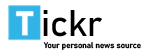
<style>
.page{position:relative;width:150px;height:54px;background:#ffffff}
.page>*{position:absolute;margin:0}
.t1{font:35.8px "Bahnschrift";color:#000000}
.t2{font:8px "Bahnschrift";color:#000000}
</style>
<div class="page">
<p class="t1" style="left:43px;top:10px;width:59px;height:27px">ickr</p>
<p class="t2" style="left:43px;top:42px;width:98px;height:8px">Your personal news source</p>
</div>
